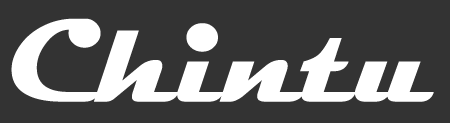
<style>
.page{position:relative;width:450px;height:123px;background:#333333}
.page>*{position:absolute;margin:0}
.t1{font:120.6px "Magneto-Bold";color:#ffffff}
</style>
<div class="page">
<p class="t1" style="left:11px;top:18px;width:423px;height:84px">Chintu</p>
</div>
